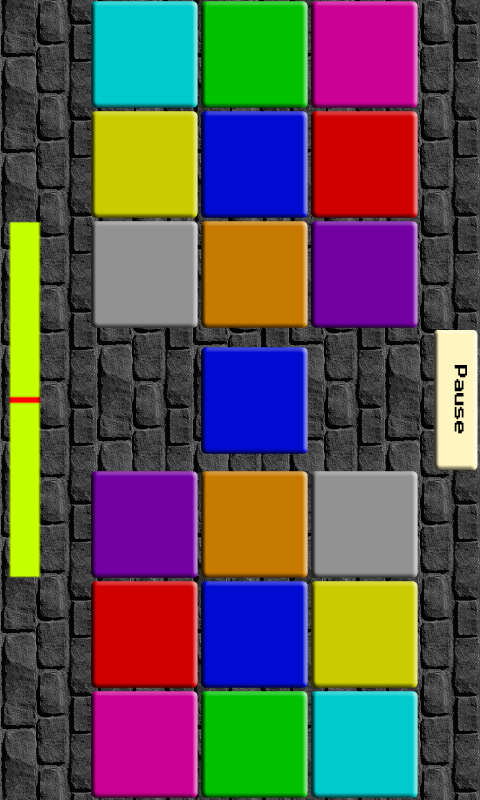
<style>
.page{position:relative;width:480px;height:800px}
.page>*{position:absolute;margin:0}
.t1{font:14px "PressStart2P";color:#000000}
</style>
<div class="page">
<p class="t1" style="left:454px;top:365px;width:13px;height:69px;rotate:90deg">Pause</p>
</div>
